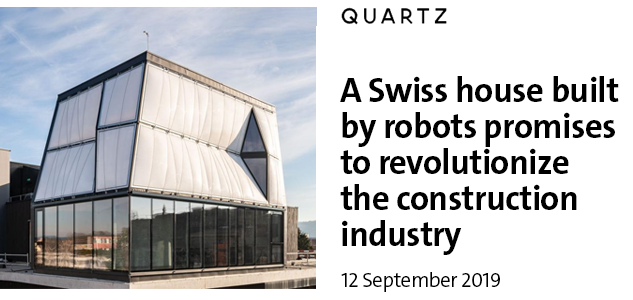
<style>
.page{position:relative;width:633px;height:300px;background:#ffffff}
.page>*{position:absolute;margin:0}
.t1{font:35px/36px "V&ATheSansC6s-Bold";letter-spacing:-0.02em;color:#000000}
.t2{font:20.8px "V&ATheSansC6s-SemiLight";letter-spacing:-0.02em;color:#000000}
</style>
<div class="page">
<p class="t1" style="left:340px;top:76px;width:279px;height:179px">A Swiss house built<br>by robots promises<br>to revolutionize<br>the construction<br>industry</p>
<p class="t2" style="left:341px;top:272px;width:159px;height:20px">12 September 2019</p>
</div>
